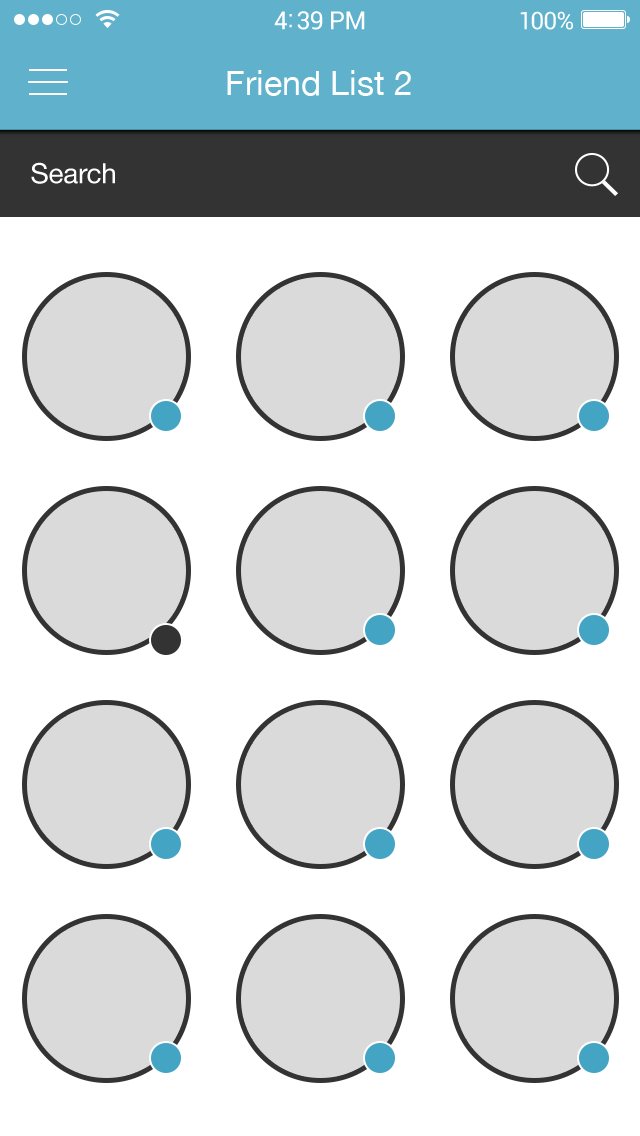
<style>
.page{position:relative;width:640px;height:1136px;background:#ffffff}
.page>*{position:absolute;margin:0}
.t1{font:34px "HelveticaNeue";color:#ffffff}
.t2{font:28px "HelveticaNeue";letter-spacing:-0.01em;color:#ffffff}
</style>
<div class="page">
<p class="t1" style="left:227px;top:70px;width:184px;height:26px">Friend List 2</p>
<p class="t2" style="left:31px;top:162px;width:84px;height:22px">Search</p>
</div>
